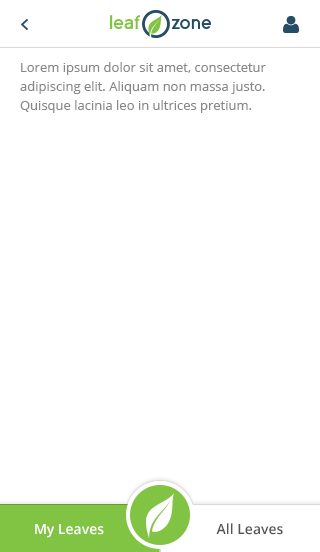
<style>
.page{position:relative;width:320px;height:552px;background:#ffffff}
.page>*{position:absolute;margin:0}
.t1{font:13px/19px "OpenSans";color:#888888}
.t2{font:14px "OpenSans-Semibold";color:#ffffff}
.t3{font:14px "OpenSans-Semibold";color:#555555}
</style>
<div class="page">
<p class="t1" style="left:20px;top:62px;width:246px;height:51px">Lorem ipsum dolor sit amet, consectetur adipiscing elit. Aliquam non massa justo. Quisque lacinia leo in ultrices pretium.</p>
<p class="t2" style="left:35px;top:524px;width:69px;height:14px">My Leaves</p>
<p class="t3" style="left:216px;top:523px;width:67px;height:12px">All Leaves</p>
</div>
